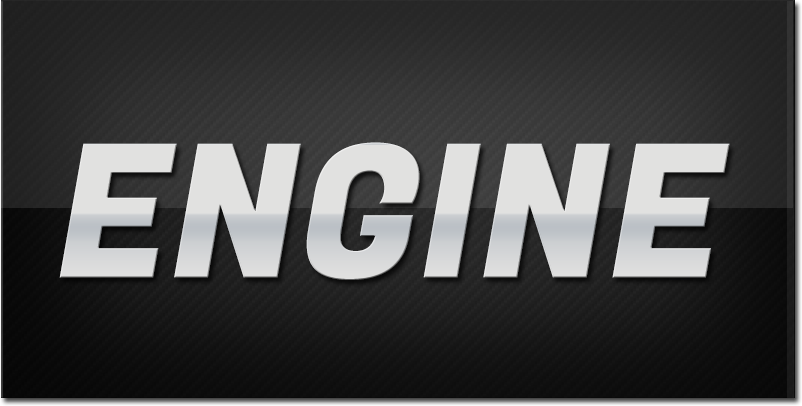
<style>
.page{position:relative;width:802px;height:406px}
.page>*{position:absolute;margin:0}
.t1{font:185.2px "FugazOne-Regular";color:#dfdfdf}
</style>
<div class="page">
<p class="t1" style="left:59px;top:142px;width:671px;height:138px">ENGINE</p>
</div>
